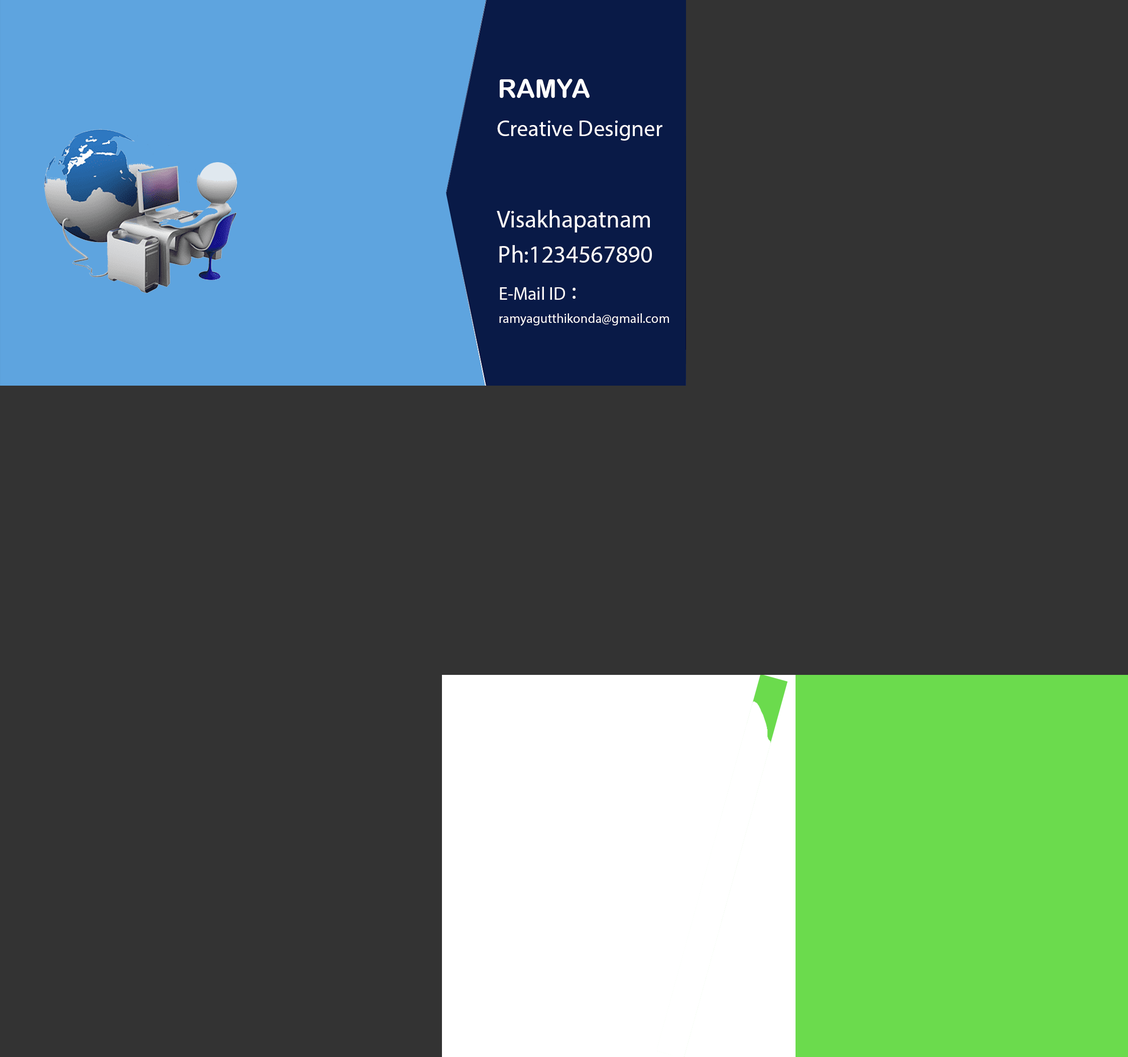
<style>
.page{position:relative;width:1128px;height:1057px;background:#333333}
.page>*{position:absolute;margin:0}
.t1{font:26px "ArialRoundedMTBold";color:#ffffff}
.t2{font:22.6px "MyriadPro-Regular";color:#fffcfc}
.t3{font:24.1px "MyriadPro-Regular";color:#fcf9f9}
.t4{font:18.1px "MyriadPro-Regular";color:#fcf9f9}
.t5{font:13.3px "MyriadPro-Regular";color:#fcf9f9}
</style>
<div class="page">
<p class="t1" style="left:500px;top:79px;width:90px;height:19px">RAMYA</p>
<p class="t2" style="left:497px;top:121px;width:165px;height:20px">Creative Designer</p>
<p class="t3" style="left:497px;top:210px;width:153px;height:23px">Visakhapatnam</p>
<p class="t3" style="left:499px;top:245px;width:153px;height:18px">Ph:1234567890</p>
<p class="t4" style="left:500px;top:287px;width:65px;height:13px">E-Mail ID</p>
<p class="t3" style="left:573px;top:288px;width:3px;height:11px">:</p>
<p class="t5" style="left:499px;top:313px;width:170px;height:13px">ramyagutthikonda@gmail.com</p>
</div>
